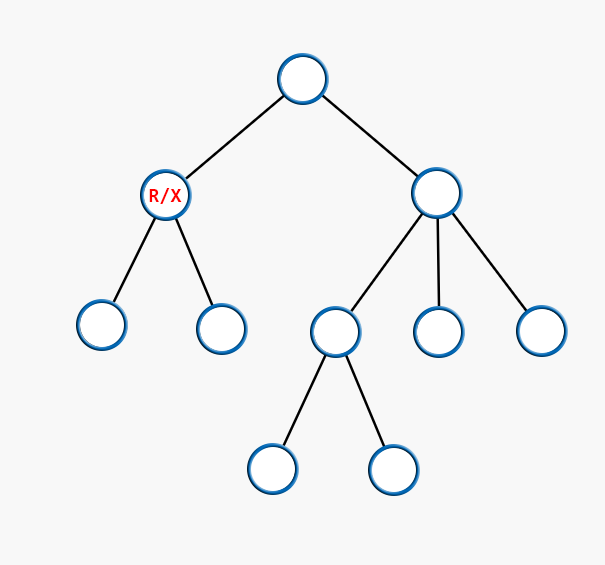
<style>
.page{position:relative;width:605px;height:565px;background:#f8f8f8}
.page>*{position:absolute;margin:0}
.t1{font:20px "Consolas-Bold";color:#ff0000}
</style>
<div class="page">
<p class="t1" style="left:149px;top:188px;width:33px;height:16px">R/X</p>
</div>
